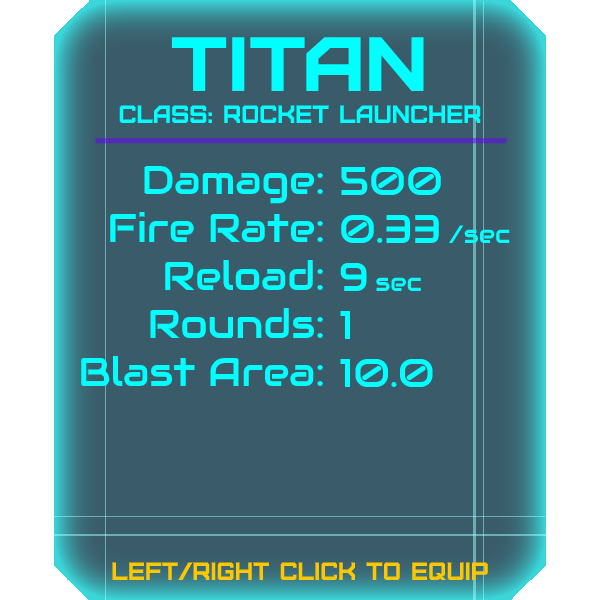
<style>
.page{position:relative;width:600px;height:600px;background:#3a5c6a}
.page>*{position:absolute;margin:0}
.t1{font:76.8px "Furore";color:#00ffff;scale:1.13 1}
.t2{font:25px "Furore";color:#00ffff}
.t3{font:40px "Audiowide-Regular";color:#00ffff}
.t4{font:25px "Audiowide-Regular";color:#00ffff}
.t5{font:25px "Furore";color:#ffc700}
</style>
<div class="page">
<p class="t1" style="left:171px;top:37px;width:253px;height:54px">titan</p>
<p class="t2" style="left:119px;top:105px;width:362px;height:18px">Class: rocket launcher</p>
<p class="t3" style="left:81px;top:165px;width:242px;height:221px;text-align:right">Damage:<br>Fire Rate:<br>Reload:<br>Rounds:<br>Blast Area:</p>
<p class="t3" style="left:340px;top:166px;width:170px;height:221px">500<br>0.33 <span class="t4">/sec<br></span>9 <span class="t4">sec<br></span>1<br>10.0</p>
<p class="t5" style="left:112px;top:562px;width:376px;height:18px">left/right click to equip</p>
</div>
